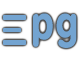
<style>
.page{position:relative;width:80px;height:64px;background:#ffffff}
.page>*{position:absolute;margin:0}
.t1{font:48px "AGBookRounded-Medium";letter-spacing:0.06em;color:#73a4d1;scale:0.8 1}
</style>
<div class="page">
<p class="t1" style="left:33px;top:13px;width:44px;height:35px">pg</p>
</div>
